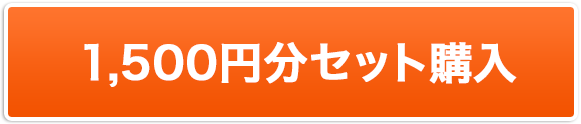
<style>
.page{position:relative;width:581px;height:124px}
.page>*{position:absolute;margin:0}
.t1{font:44px "HiraKakuPro-W6";letter-spacing:0.01em;color:#ffffff;font-weight:bold}
</style>
<div class="page">
<p class="t1" style="left:84px;top:42px;width:433px;height:45px">1,500円分セット購入</p>
</div>
